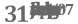
<style>
.page{position:relative;width:78px;height:24px;background:#ffffff}
.page>*{position:absolute;margin:0}
.t1{font:24px "Cambria-Bold";letter-spacing:-0.1em;color:#686868}
.t2{font:18.7px "Cambria-Bold";letter-spacing:-0.05em;color:#686868}
.t3{font:16px "Cambria-Bold";letter-spacing:-0.1em;color:#686868}
</style>
<div class="page">
<p class="t1" style="left:5px;top:5px;width:23px;height:17px">31</p>
<p class="t2" style="left:29px;top:5px;width:35px;height:14px">may</p>
<p class="t2" style="left:30px;top:5px;width:30px;height:11px">nov</p>
<p class="t2" style="left:30px;top:3px;width:25px;height:13px">oct</p>
<p class="t2" style="left:30px;top:5px;width:27px;height:14px">sep</p>
<p class="t2" style="left:30px;top:5px;width:29px;height:15px">aug</p>
<p class="t2" style="left:30px;top:1px;width:21px;height:19px">jul</p>
<p class="t2" style="left:30px;top:2px;width:26px;height:18px">jun</p>
<p class="t2" style="left:30px;top:5px;width:28px;height:14px">apr</p>
<p class="t2" style="left:30px;top:5px;width:34px;height:11px">mar</p>
<p class="t2" style="left:30px;top:1px;width:25px;height:15px">feb</p>
<p class="t2" style="left:30px;top:2px;width:25px;height:18px">jan</p>
<p class="t2" style="left:31px;top:1px;width:27px;height:15px">dec</p>
<p class="t3" style="left:55px;top:3px;width:19px;height:12px">‘07</p>
</div>
